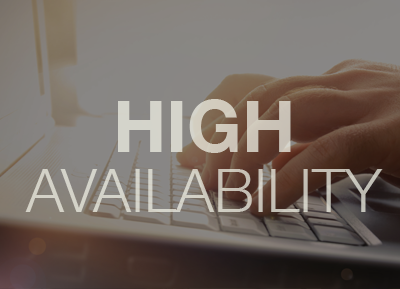
<style>
.page{position:relative;width:400px;height:289px}
.page>*{position:absolute;margin:0}
.t1{font:60px/60px "HelveticaNeue-Light";color:#d2cdc0}
.t2{font:72px/72px "HelveticaNeue-Bold";color:#d2cdc0}
.t3{font:72px/60px "HelveticaNeue-Bold";color:#d2cdc0}
</style>
<div class="page">
<p class="t1" style="left:25px;top:99px;width:358px;height:113px;text-align:center"><span class="t2">H</span><span class="t3">IGH<br></span>AVAILABILITY</p>
</div>
